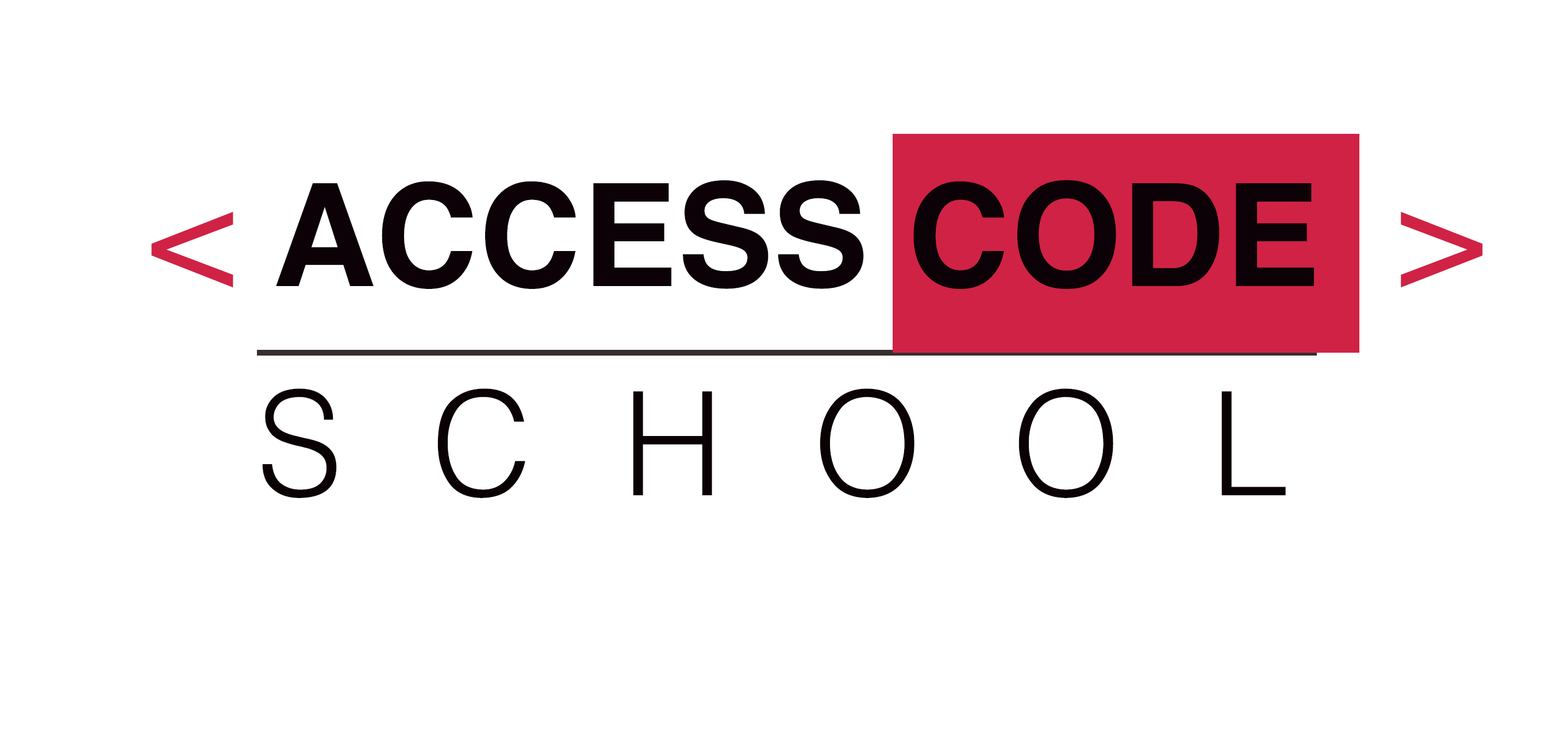
<style>
.page{position:relative;width:1568px;height:737px;background:#ffffff}
.page>*{position:absolute;margin:0}
.t1{font:142.8px "Helvetica-Bold";color:#0c0106;text-transform:uppercase}
.t2{font:142.8px "Helvetica";color:#d02245;text-transform:uppercase}
.t3{font:144.3px "Helvetica-Light";letter-spacing:0.6em;color:#0a0103;text-transform:uppercase}
</style>
<div class="page">
<p class="t1" style="left:151px;top:180px;width:1332px;height:109px"><span class="t2">&lt; </span>ACCESS CODE  <span class="t2">&gt;</span></p>
<p class="t3" style="left:262px;top:389px;width:1024px;height:109px">SCHOOL</p>
</div>
